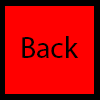
<style>
.page{position:relative;width:100px;height:100px;background:#ff0000}
.page>*{position:absolute;margin:0}
.t1{font:30px "MyriadPro-Regular";color:#000000}
</style>
<div class="page">
<p class="t1" style="left:22px;top:36px;width:57px;height:22px">Back</p>
</div>
